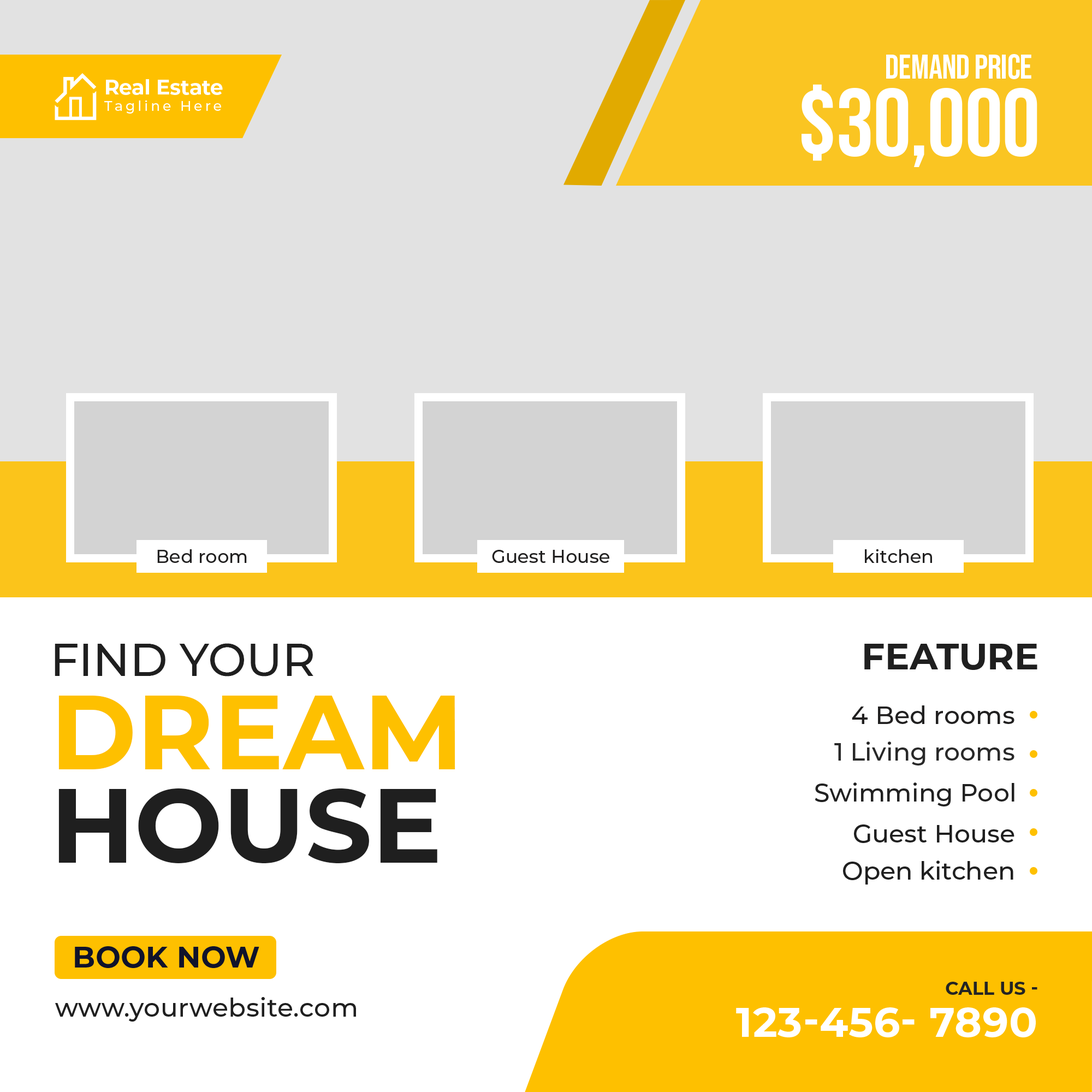
<style>
.page{position:relative;width:1092px;height:1092px;background:#ffffff}
.page>*{position:absolute;margin:0}
.t1{font:34.1px "BebasNeue-Regular";letter-spacing:-0.01em;color:#ffffff}
.t2{font:13.8px/16.1px "Montserrat-Medium";letter-spacing:0.19em;color:#ffffff}
.t3{font:20.7px/25.3px "Montserrat-Bold";letter-spacing:-0.01em;color:#ffffff}
.t4{font:95.5px "BebasNeue-Regular";letter-spacing:-0.01em;color:#ffffff}
.t5{font:18.2px "Montserrat-Medium";letter-spacing:0.005em;color:#212020}
.t6{font:45.5px/93.3px "Montserrat-Medium";color:#1f1f1f;text-transform:uppercase}
.t7{font:104.6px/93.3px "Montserrat-Bold";color:#fec000;text-transform:uppercase}
.t8{font:104.6px/93.3px "Montserrat-Bold";color:#1f1f1f;text-transform:uppercase}
.t9{font:36.4px "Montserrat-Bold";letter-spacing:0.005em;color:#1f1f1f;text-transform:uppercase}
.t10{font:25px "Montserrat-Medium";letter-spacing:0.005em;color:#212020}
.t11{font:25px "Montserrat-Medium";color:#282828}
.t12{font:25px "Montserrat-Medium";color:#212121}
.t13{font:25px "Montserrat-Medium";color:#1f1f1f}
.t14{font:29.6px "Montserrat-Bold";letter-spacing:0.01em;color:#10132b;text-transform:uppercase}
.t15{font:18.2px "Montserrat-Bold";letter-spacing:0.005em;color:#242424;text-transform:uppercase}
.t16{font:25.8px "Montserrat-Medium";letter-spacing:0.01em;color:#1f1f1f}
.t17{font:41.6px "Montserrat-Bold";letter-spacing:0.005em;color:#ffffff;text-transform:uppercase}
</style>
<div class="page">
<p class="t1" style="left:886px;top:54px;width:145px;height:25px">Demand price</p>
<p class="t2" style="left:104px;top:79px;width:119px;height:35px"><span class="t3">Real Estate<br></span>Tagline Here</p>
<p class="t4" style="left:802px;top:84px;width:235px;height:83px">$30,000</p>
<p class="t5" style="left:157px;top:549px;width:90px;height:14px">Bed room</p>
<p class="t5" style="left:492px;top:550px;width:117px;height:13px">Guest House</p>
<p class="t5" style="left:865px;top:549px;width:67px;height:14px">kitchen</p>
<p class="t6" style="left:55px;top:643px;width:400px;height:220px">Find your<br><span class="t7">Dream<br></span><span class="t8">House</span></p>
<p class="t9" style="left:864px;top:644px;width:173px;height:26px">Feature</p>
<p class="t10" style="left:852px;top:705px;width:162px;height:19px">4 Bed rooms</p>
<p class="t11" style="left:834px;top:741px;width:180px;height:24px">1 Living rooms</p>
<p class="t12" style="left:815px;top:782px;width:199px;height:24px">Swimming Pool</p>
<p class="t13" style="left:854px;top:824px;width:160px;height:19px">Guest House</p>
<p class="t13" style="left:843px;top:860px;width:170px;height:25px">Open kitchen</p>
<p class="t14" style="left:75px;top:946px;width:184px;height:22px">Book now</p>
<p class="t15" style="left:946px;top:982px;width:91px;height:13px">Call us -</p>
<p class="t16" style="left:55px;top:997px;width:301px;height:25px">www.yourwebsite.com</p>
<p class="t17" style="left:736px;top:1007px;width:300px;height:30px">123-456- 7890</p>
</div>
